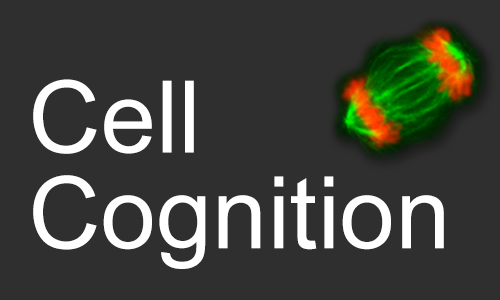
<style>
.page{position:relative;width:500px;height:300px;background:#302f2f}
.page>*{position:absolute;margin:0}
.t1{font:100px/95.8px "ArialMT";color:#ffffff}
</style>
<div class="page">
<p class="t1" style="left:33px;top:79px;width:411px;height:190px">Cell<br>Cognition</p>
</div>
